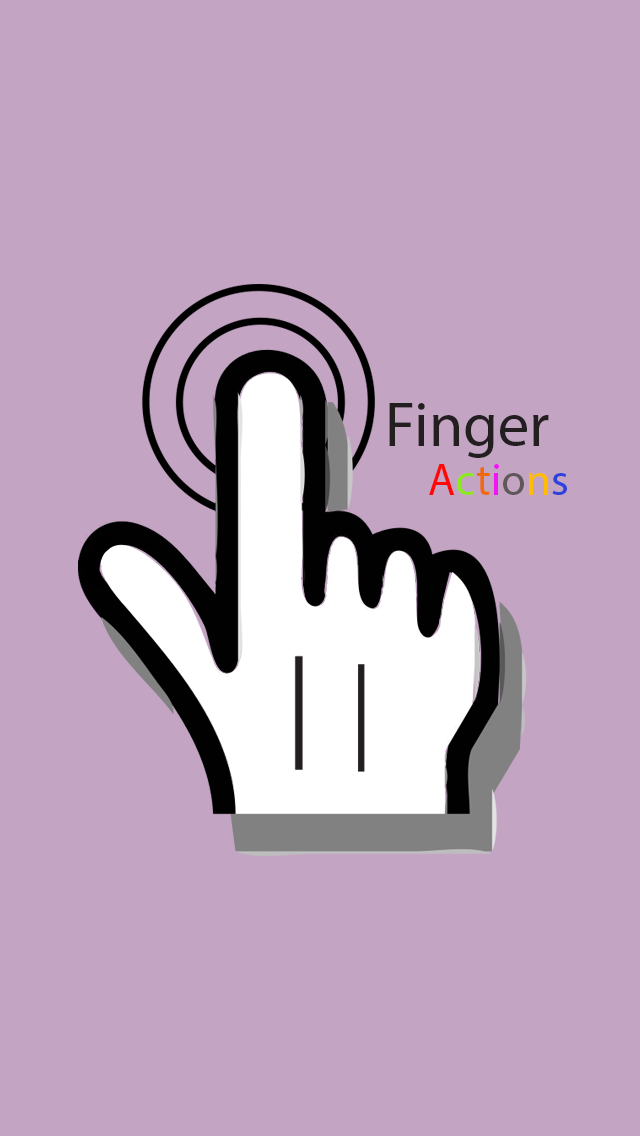
<style>
.page{position:relative;width:640px;height:1136px;background:#c3a4c3}
.page>*{position:absolute;margin:0}
.t1{font:62.4px "MyriadPro-Regular";color:#231f20}
.t2{font:44.9px "MyriadPro-Regular";color:#ff0808}
.t3{font:44.9px "MyriadPro-Regular";color:#8aea1b}
.t4{font:44.9px "MyriadPro-Regular";color:#ef6a0f}
.t5{font:44.9px "MyriadPro-Regular";color:#f214f2}
.t6{font:44.9px "MyriadPro-Regular";color:#605858}
.t7{font:44.9px "MyriadPro-Regular";color:#ffbc00}
.t8{font:44.9px "MyriadPro-Regular";color:#2c42dd}
</style>
<div class="page">
<p class="t1" style="left:389px;top:403px;width:160px;height:55px">Finger</p>
<p class="t2" style="left:429px;top:464px;width:138px;height:31px">A<span class="t3">c</span><span class="t4">t</span><span class="t5">i</span><span class="t6">o</span><span class="t7">n</span><span class="t8">s</span></p>
</div>
